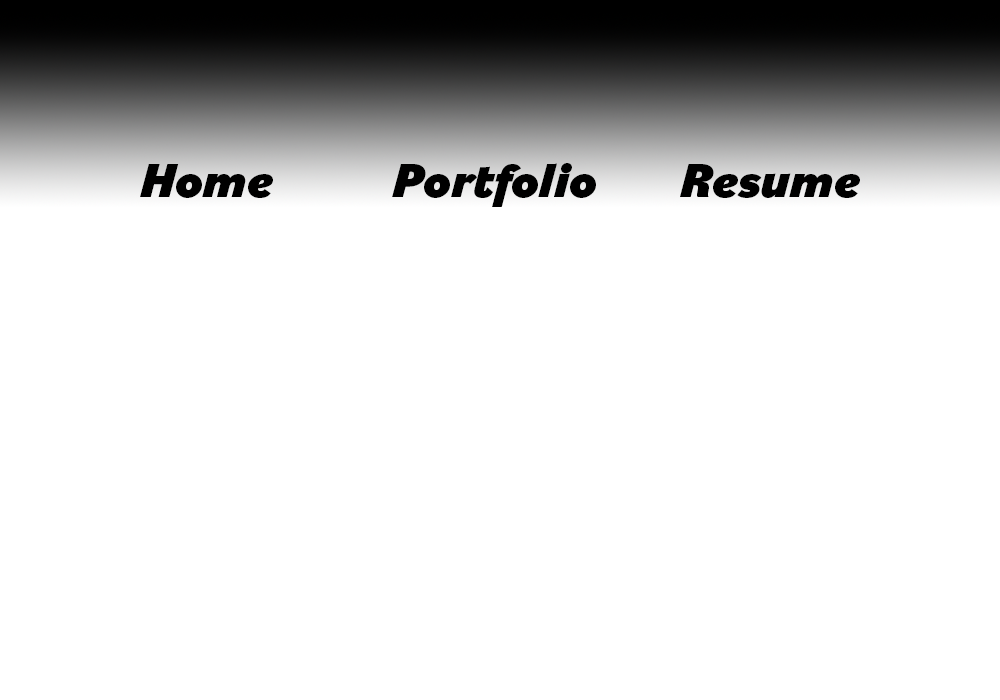
<style>
.page{position:relative;width:1000px;height:700px;background:#ffffff}
.page>*{position:absolute;margin:0}
.t1{font:50px "Bilo-BlackItalic";color:#000000}
</style>
<div class="page">
<p class="t1" style="left:140px;top:163px;width:720px;height:44px">Home    Portfolio   Resume</p>
</div>
